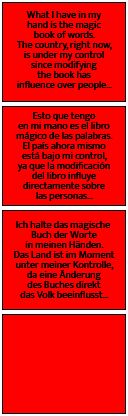
<style>
.page{position:relative;width:128px;height:416px;background:#ff0000}
.page>*{position:absolute;margin:0}
.t1{font:10px/10px "MuktaVaani-Regular";color:#000000}
</style>
<div class="page">
<p class="t1" style="left:14px;top:11px;width:101px;height:287px;text-align:center">What I have in my<br>hand is the magic<br>book of words.<br>The country, right now,<br>is under my control<br>since modifying<br>the book has<br>influence over people…<br><br><br>Esto que tengo<br>en mi mano es el libro<br>mágico de las palabras.<br>El país ahora mismo<br>está bajo mi control,<br>ya que la modificación<br>del libro influye<br>directamente sobre<br>las personas…<br><br><br>Ich halte das magische <br>Buch der Worte<br>in meinen Händen.<br>Das Land ist im Moment<br>unter meiner Kontrolle,<br>da eine Änderung<br>des Buches direkt<br>das Volk beeinflusst…</p>
</div>
